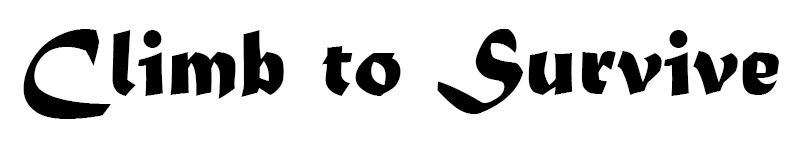
<style>
.page{position:relative;width:800px;height:150px;background:#ffffff}
.page>*{position:absolute;margin:0}
.t1{font:100px "MaturaMTScriptCapitals";color:#000000}
</style>
<div class="page">
<p class="t1" style="left:23px;top:29px;width:756px;height:90px">Climb to Survive</p>
</div>
